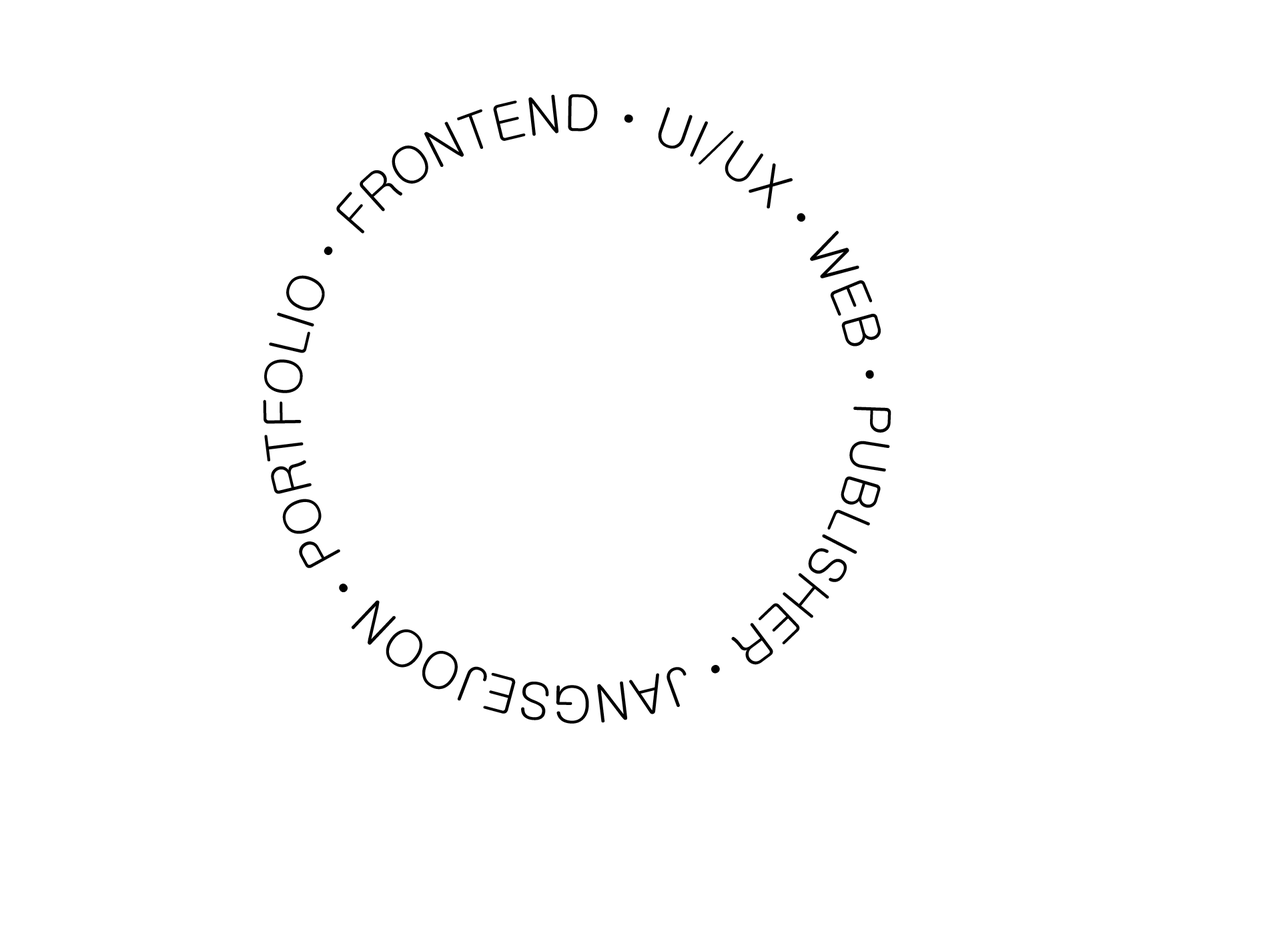
<style>
.page{position:relative;width:1261px;height:946px;background:#ffffff}
.page>*{position:absolute;margin:0}
.t1{font:51.2px "Gulim";color:#000000}
</style>
<div class="page">
<p class="t1" style="left:263px;top:94px;width:628px;height:629px">FRONTENDㆍUI/UXㆍWEBㆍPUBLISHERㆍJANGSEJOONㆍPORTFOLIOㆍ</p>
</div>
